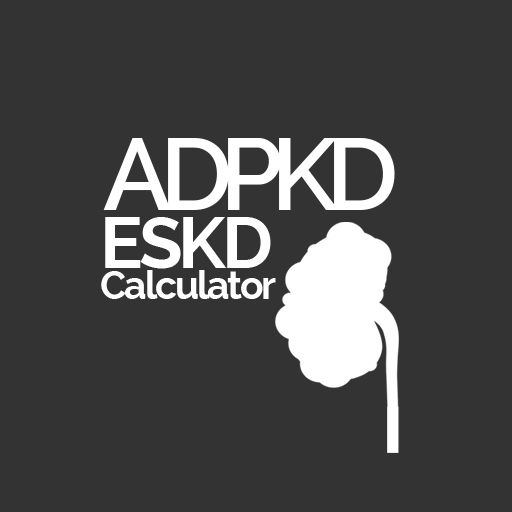
<style>
.page{position:relative;width:512px;height:512px;background:#333333}
.page>*{position:absolute;margin:0}
.t1{font:101.4px "Raleway-SemiBold";letter-spacing:-0.12em;color:#ffffff}
.t2{font:39.1px/31px "Raleway-Bold";letter-spacing:-0.06em;color:#ffffff}
.t3{font:70.7px/31px "Raleway-Bold";letter-spacing:-0.06em;color:#ffffff}
</style>
<div class="page">
<p class="t1" style="left:103px;top:138px;width:292px;height:72px">ADPKD</p>
<p class="t2" style="left:101px;top:217px;width:175px;height:82px"><span class="t3">ESKD<br></span>Calculator</p>
</div>
